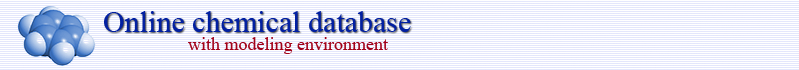
<style>
.page{position:relative;width:799px;height:70px;background:#ffffff}
.page>*{position:absolute;margin:0}
.t1{font:30px "TimesNewRomanPSMT";color:#0220a2}
.t2{font:18px "TimesNewRomanPSMT";color:#a20219}
</style>
<div class="page">
<p class="t1" style="left:104px;top:11px;width:307px;height:21px">Online chemical database</p>
<p class="t2" style="left:188px;top:37px;width:200px;height:17px">with modeling environment</p>
</div>
